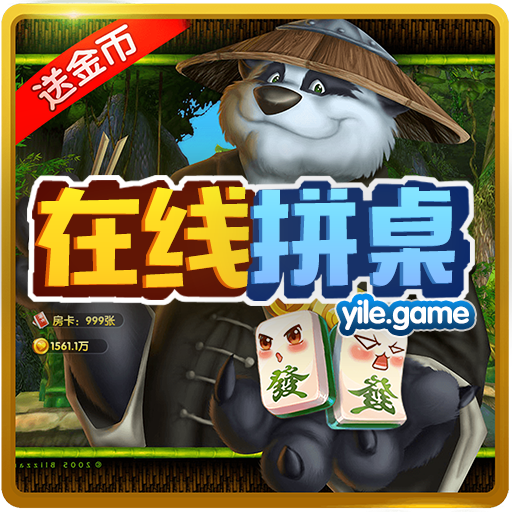
<style>
.page{position:relative;width:512px;height:512px}
.page>*{position:absolute;margin:0}
.t1{font:109.9px "MFTongXin_Noncommercial-Regular";letter-spacing:-0.025em;color:#fed523}
.t2{font:109.9px "MFTongXin_Noncommercial-Regular";letter-spacing:-0.025em;color:#ffd723}
.t3{font:109.9px "MFTongXin_Noncommercial-Regular";letter-spacing:-0.025em;color:#7dd0ff}
.t4{font:109.9px "MFTongXin_Noncommercial-Regular";letter-spacing:-0.025em;color:#7fd4ff}
.t5{font:31.3px "FZY4JW--GB1-0";letter-spacing:-0.025em;color:#ffffff}
</style>
<div class="page">
<p class="t1" style="left:34px;top:187px;width:212px;height:102px">在线</p>
<p class="t2" style="left:38px;top:186px;width:211px;height:102px">在线</p>
<p class="t3" style="left:250px;top:188px;width:202px;height:99px">拼桌</p>
<p class="t4" style="left:253px;top:187px;width:202px;height:99px">拼桌</p>
<p class="t5" style="left:342px;top:299px;width:127px;height:31px">yile.game</p>
</div>
